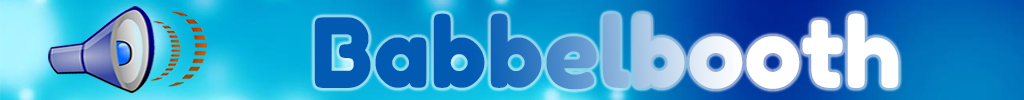
<style>
.page{position:relative;width:1024px;height:100px}
.page>*{position:absolute;margin:0}
.t1{font:96.3px "FredokaOne-Regular"}
</style>
<div class="page">
<p class="t1" style="left:314px;top:13px;width:585px;height:77px">Babbelbooth</p>
</div>
